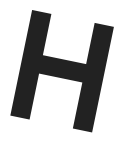
<style>
.page{position:relative;width:120px;height:164px;background:#ffffff}
.page>*{position:absolute;margin:0}
.t1{font:152px "Akkurat-Bold";color:#222222;text-transform:uppercase}
</style>
<div class="page">
<p class="t1" style="left:10px;top:10px;width:104px;height:123px;rotate:12deg">H</p>
</div>
